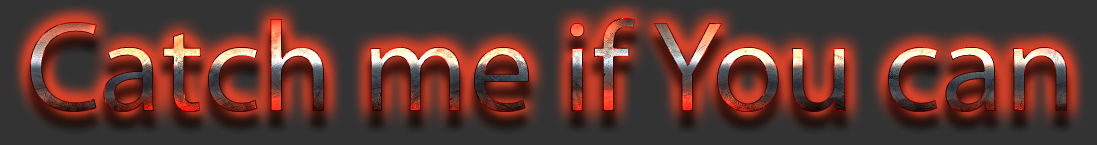
<style>
.page{position:relative;width:1097px;height:145px;background:#333333}
.page>*{position:absolute;margin:0}
.t1{font:130px "MyriadPro-Regular"}
</style>
<div class="page">
<p class="t1" style="left:30px;top:18px;width:1037px;height:94px">Catch me if You can</p>
</div>
